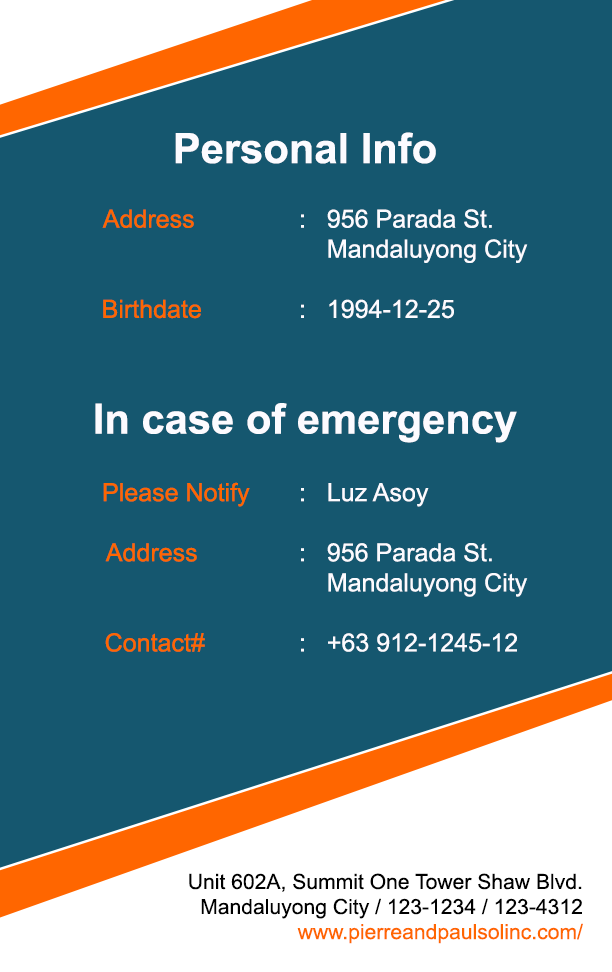
<style>
.page{position:relative;width:612px;height:972px;background:#15576f}
.page>*{position:absolute;margin:0}
.t1{font:41.7px "Arial-BoldMT";color:#fcfbff}
.t2{font:25px "ArialMT";color:#ff6600}
.t3{font:25px "ArialMT";color:#fcfbff}
.t4{font:20.9px "ArialMT";color:#000000}
.t5{font:20.9px "ArialMT";color:#ff6600}
</style>
<div class="page">
<p class="t1" style="left:175px;top:132px;width:261px;height:32px">Personal Info</p>
<p class="t2" style="left:102px;top:209px;width:92px;height:19px">Address</p>
<p class="t3" style="left:301px;top:209px;width:227px;height:54px">:   956 Parada St.<br>    Mandaluyong City</p>
<p class="t2" style="left:103px;top:299px;width:98px;height:20px">Birthdate</p>
<p class="t3" style="left:301px;top:299px;width:153px;height:20px">:   1994-12-25</p>
<p class="t1" style="left:95px;top:403px;width:422px;height:40px">In case of emergency</p>
<p class="t2" style="left:103px;top:482px;width:147px;height:25px">Please Notify</p>
<p class="t3" style="left:301px;top:483px;width:128px;height:24px">:   Luz Asoy</p>
<p class="t2" style="left:105px;top:543px;width:92px;height:19px">Address</p>
<p class="t3" style="left:301px;top:543px;width:227px;height:54px">:   956 Parada St.<br>    Mandaluyong City</p>
<p class="t2" style="left:105px;top:633px;width:100px;height:19px">Contact#</p>
<p class="t3" style="left:301px;top:633px;width:216px;height:19px">:   +63 912-1245-12</p>
<p class="t4" style="left:189px;top:873px;width:394px;height:71px;text-align:right">Unit 602A, Summit One Tower Shaw Blvd.<br>Mandaluyong City / 123-1234 / 123-4312<br><span class="t5">www.pierreandpaulsolinc.com/</span></p>
</div>
